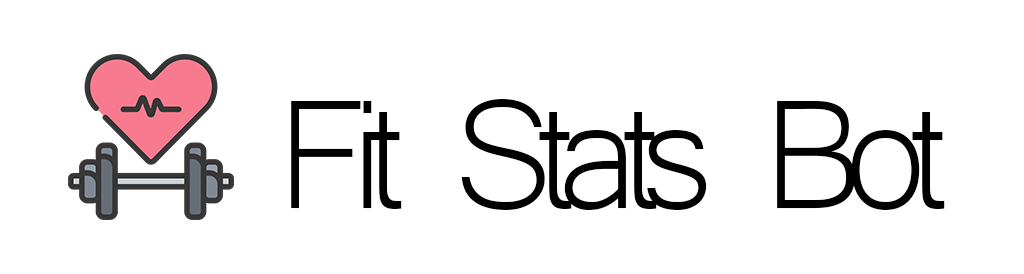
<style>
.page{position:relative;width:1024px;height:274px;background:#ffffff}
.page>*{position:absolute;margin:0}
.t1{font:200px "Microsoft-Yi-Baiti";letter-spacing:-0.1em;color:#000000}
</style>
<div class="page">
<p class="t1" style="left:291px;top:99px;width:654px;height:111px">Fit Stats Bot</p>
</div>
